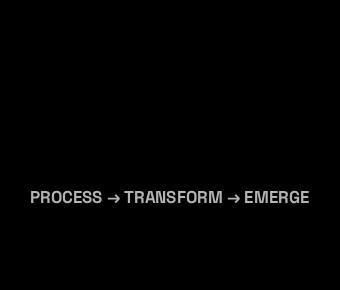
<style>
.page{position:relative;width:340px;height:290px;background:#000000}
.page>*{position:absolute;margin:0}
.t1{font:17.2px "SpaceGroteskLight-Bold";color:#b3b3b3}
</style>
<div class="page">
<p class="t1" style="left:31px;top:190px;width:278px;height:14px">PROCESS → TRANSFORM → EMERGE</p>
</div>
